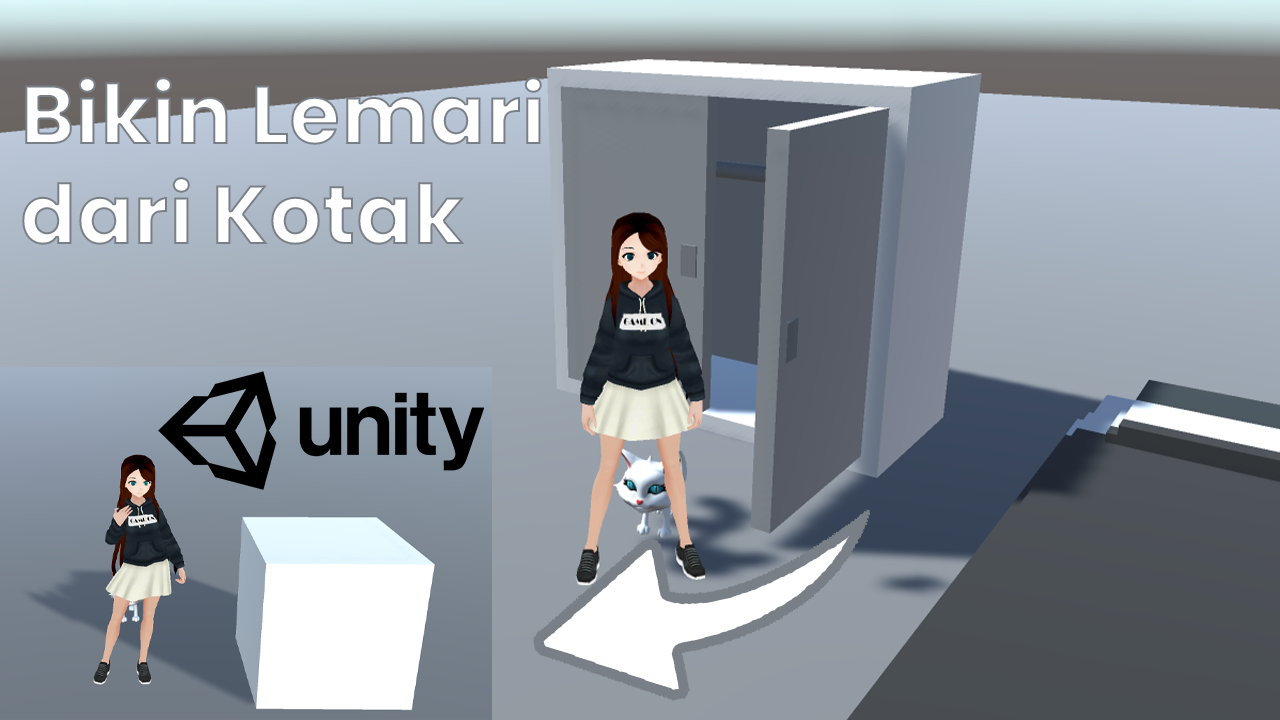
<style>
.page{position:relative;width:1280px;height:720px}
.page>*{position:absolute;margin:0}
.t1{font:83.3px "Poppins-Bold";color:#ffffff}
</style>
<div class="page">
<p class="t1" style="left:22px;top:77px;width:520px;height:168px">Bikin Lemari <br>dari Kotak</p>
</div>
